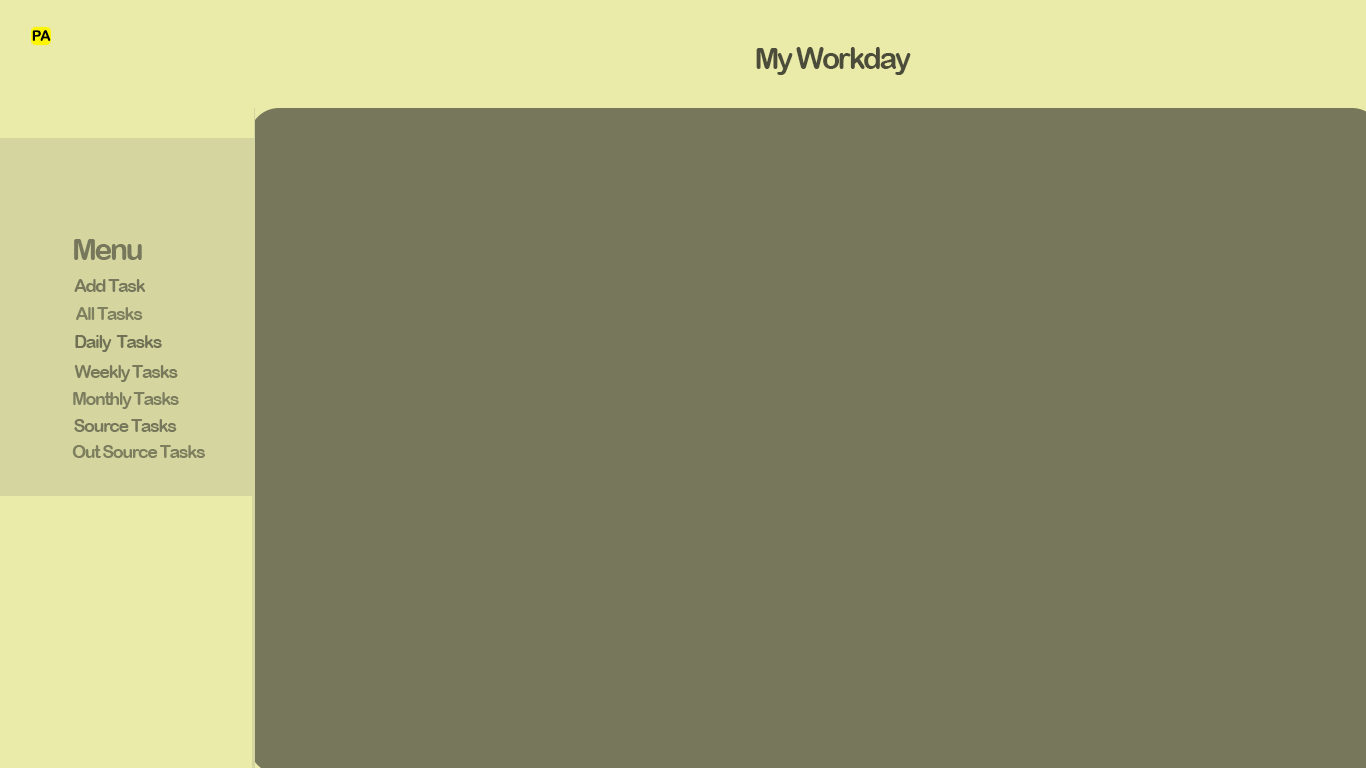
<style>
.page{position:relative;width:1366px;height:768px;background:#77775b}
.page>*{position:absolute;margin:0}
.t1{font:30px "ArialRoundedMTBold";letter-spacing:-0.08em;color:#4c4c3a}
.t2{font:30px "ArialRoundedMTBold";letter-spacing:-0.08em;color:#77775b}
.t3{font:18px "ArialRoundedMTBold";letter-spacing:-0.08em;color:#77775b}
.t4{font:18px "ArialRoundedMTBold";letter-spacing:-0.08em;color:#7f805f}
.t5{font:18px "ArialRoundedMTBold";letter-spacing:-0.08em;color:#707154}
.t6{font:18px "ArialRoundedMTBold";letter-spacing:-0.08em;color:#78795b}
.t7{font:18px "ArialRoundedMTBold";letter-spacing:-0.08em;color:#7d7e60}
.t8{font:18px "ArialRoundedMTBold";letter-spacing:-0.08em;color:#7d7e5d}
</style>
<div class="page">
<p class="t1" style="left:756px;top:47px;width:155px;height:28px">My Workday</p>
<p class="t2" style="left:74px;top:239px;width:68px;height:21px">Menu</p>
<p class="t3" style="left:74px;top:279px;width:72px;height:13px">Add Task</p>
<p class="t4" style="left:76px;top:307px;width:67px;height:13px">All Tasks</p>
<p class="t5" style="left:75px;top:335px;width:87px;height:17px">Daily  Tasks</p>
<p class="t6" style="left:74px;top:365px;width:104px;height:17px">Weekly Tasks</p>
<p class="t7" style="left:73px;top:392px;width:106px;height:17px">Monthly Tasks</p>
<p class="t3" style="left:74px;top:419px;width:103px;height:13px">Source Tasks</p>
<p class="t8" style="left:72px;top:445px;width:133px;height:13px">Out Source Tasks</p>
</div>
